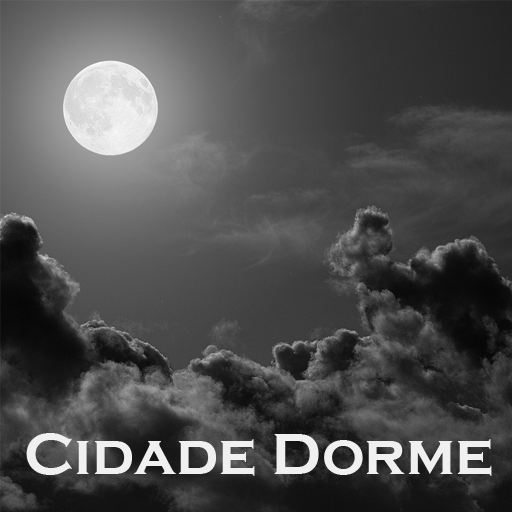
<style>
.page{position:relative;width:512px;height:512px}
.page>*{position:absolute;margin:0}
.t1{font:60px "CopperplateGothic-Bold";color:#f0f0f0}
</style>
<div class="page">
<p class="t1" style="left:26px;top:433px;width:466px;height:43px">Cidade Dorme</p>
</div>
